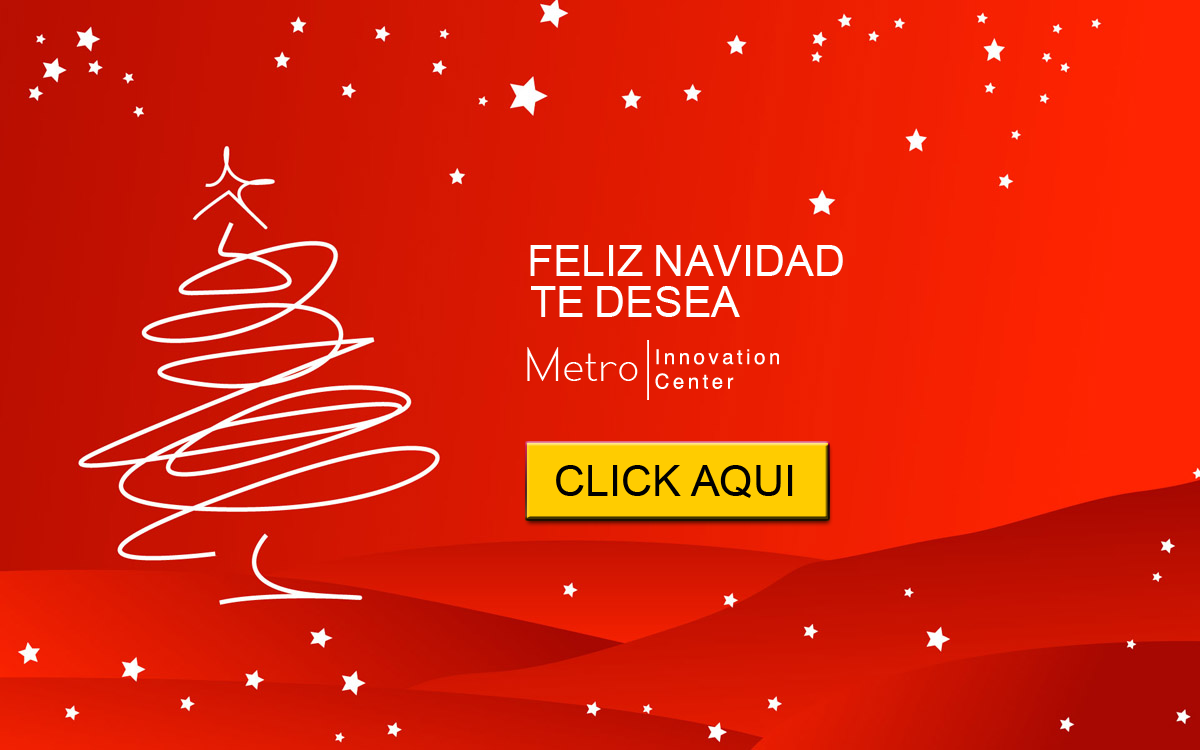
<style>
.page{position:relative;width:1200px;height:750px}
.page>*{position:absolute;margin:0}
.t1{font:43px "ArialMT";color:#ffffff}
.t2{font:43px "ArialMT";color:#000000}
</style>
<div class="page">
<p class="t1" style="left:530px;top:245px;width:313px;height:31px">FELIZ NAVIDAD</p>
<p class="t1" style="left:531px;top:286px;width:209px;height:31px">TE DESEA</p>
<p class="t2" style="left:556px;top:465px;width:237px;height:33px">CLICK AQUI</p>
</div>
